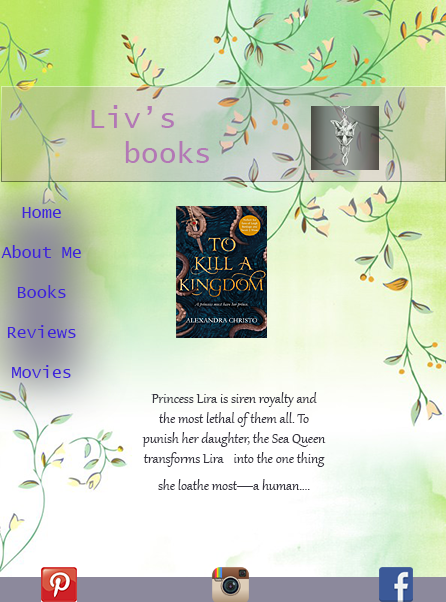
<style>
.page{position:relative;width:446px;height:602px}
.page>*{position:absolute;margin:0}
.t1{font:29.2px "LucidaConsole";color:#af70b1}
.t2{font:16.7px "LucidaConsole";color:#3f23d9}
.t3{font:16.7px "Gabriola";color:#383641}
.t4{font:16.7px "Candara";color:#3f23d9}
</style>
<div class="page">
<p class="t1" style="left:91px;top:105px;width:118px;height:58px">Liv’s<br>  books</p>
<p class="t2" style="left:1px;top:207px;width:80px;height:171px;text-align:center">Home<br><br>About Me<br><br>Books<br><br>Reviews<br><br>Movies</p>
<p class="t3" style="left:142px;top:392px;width:184px;height:98px;text-align:center"><span class="t4"><br></span>Princess Lira is siren royalty and the most lethal of them all. To punish her daughter, the Sea Queen transforms Lira into the one thing she loathe most—a human....</p>
</div>
